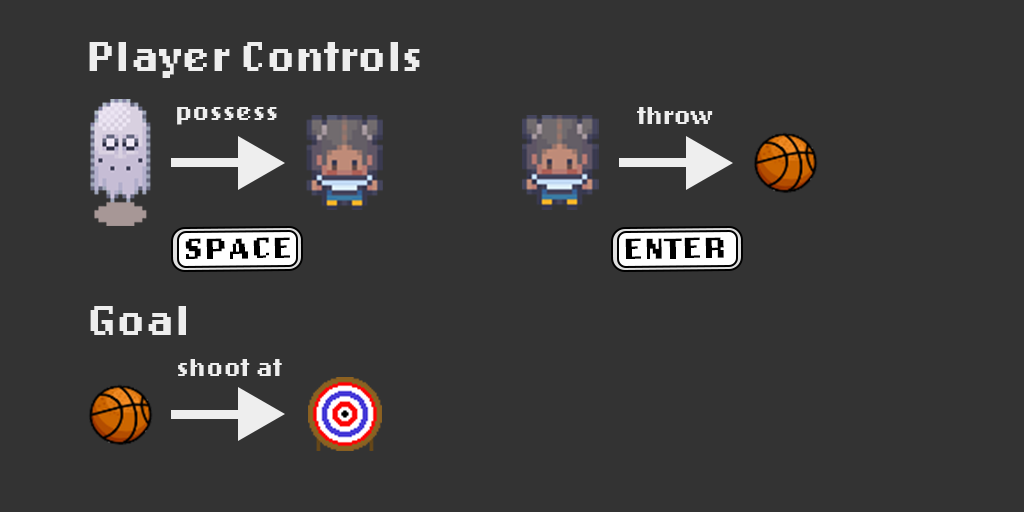
<style>
.page{position:relative;width:1024px;height:512px;background:#333333}
.page>*{position:absolute;margin:0}
.t1{font:44px "LoRes12OT-Bold";color:#eeeeee}
.t2{font:25.9px "LoRes12OT-Bold";color:#eeeeee}
.t3{font:30.3px "LoRes12OT-Bold";color:#000000;scale:1.18 1}
</style>
<div class="page">
<p class="t1" style="left:89px;top:42px;width:331px;height:36px">Player Controls</p>
<p class="t2" style="left:177px;top:107px;width:100px;height:18px">possess</p>
<p class="t2" style="left:637px;top:107px;width:76px;height:17px">throw</p>
<p class="t3" style="left:185px;top:237px;width:105px;height:22px;rotate:-1deg">SPACE</p>
<p class="t3" style="left:625px;top:237px;width:99px;height:22px;rotate:-1deg">ENTER</p>
<p class="t1" style="left:90px;top:306px;width:96px;height:29px">Goal</p>
<p class="t2" style="left:178px;top:359px;width:104px;height:17px">shoot at</p>
</div>
